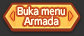
<style>
.page{position:relative;width:84px;height:36px}
.page>*{position:absolute;margin:0}
.t1{font:10px/10px "UDShinGoPro-Medium";letter-spacing:-0.04em;color:#fffbdd;scale:0.9 1}
</style>
<div class="page">
<p class="t1" style="left:17px;top:6px;width:48px;height:20px;text-align:center">Buka menu<br>Armada</p>
</div>
